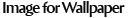
<style>
.page{position:relative;width:128px;height:18px;background:#ffffff}
.page>*{position:absolute;margin:0}
.t1{font:16px "AmiraParadiso";letter-spacing:-0.06em;color:#000000}
</style>
<div class="page">
<p class="t1" style="left:3px;top:1px;width:122px;height:16px;opacity:0.96">Image for Wallpaper</p>
</div>
